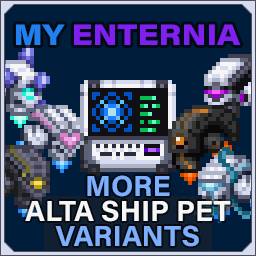
<style>
.page{position:relative;width:256px;height:256px;background:#001e3b}
.page>*{position:absolute;margin:0}
.t1{font:29.2px "AcuminConcept_760.000wght_112.000wdth";color:#8020f0}
.t2{font:29.2px "AcuminConcept_760.000wght_112.000wdth";color:#2080f0}
.t3{font:29.2px/25px "AcuminConcept-Bold";color:#f6f6f6}
.t4{font:29.2px/25px "AcuminConcept-Bold";color:#7eafff}
</style>
<div class="page">
<p class="t1" style="left:16px;top:24px;width:225px;height:21px"><span class="t2">MY </span>ENTERNIA</p>
<p class="t3" style="left:25px;top:175px;width:206px;height:72px;text-align:center"><span class="t4">MORE<br></span>ALTA SHIP PET<br><span class="t4">VARIANTS</span></p>
</div>
